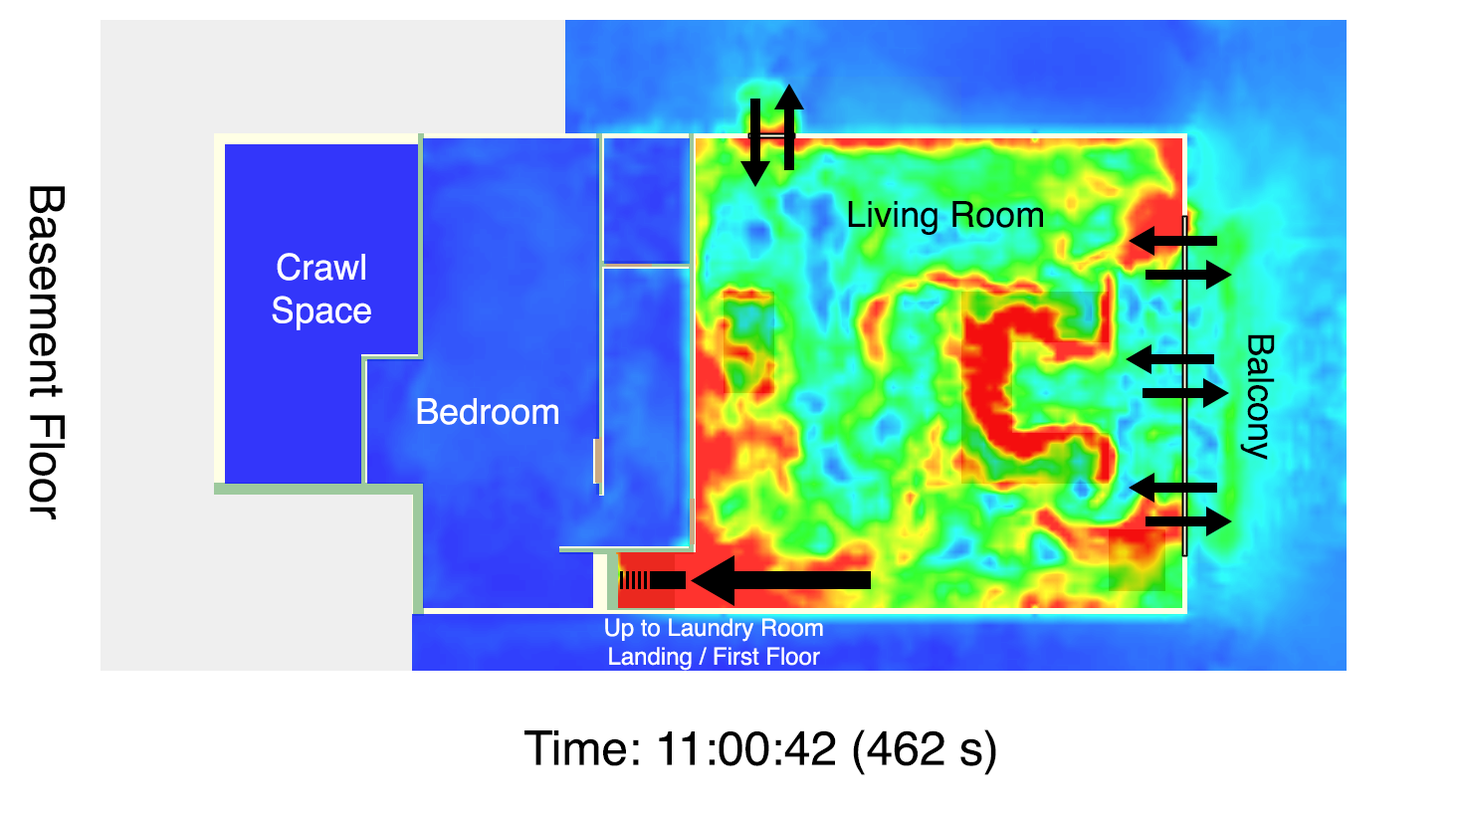
<style>
.page{position:relative;width:1459px;height:817px;background:#ffffff}
.page>*{position:absolute;margin:0}
.t1{font:47.8px "Helvetica";color:#000000}
.t2{font:35.8px "Helvetica";color:#000000}
.t3{font:35.8px "Helvetica";color:#ffffff}
.t4{font:23.9px "Helvetica";color:#ffffff}
</style>
<div class="page">
<p class="t1" style="left:29px;top:186px;width:36px;height:334px;rotate:90deg">Basement Floor</p>
<p class="t2" style="left:848px;top:201px;width:195px;height:34px">Living Room</p>
<p class="t3" style="left:272px;top:253px;width:99px;height:77px;text-align:center">Crawl<br>Space</p>
<p class="t2" style="left:1240px;top:334px;width:35px;height:126px;rotate:90deg">Balcony</p>
<p class="t3" style="left:417px;top:398px;width:141px;height:27px">Bedroom</p>
<p class="t4" style="left:605px;top:618px;width:218px;height:53px;text-align:center">Up to Laundry Room<br>Landing / First Floor</p>
<p class="t1" style="left:525px;top:730px;width:471px;height:45px">Time: 11:00:42 (462 s)</p>
</div>
